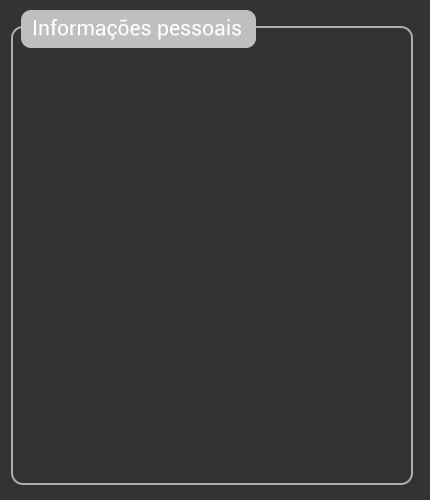
<style>
.page{position:relative;width:430px;height:500px;background:#333333}
.page>*{position:absolute;margin:0}
.t1{font:21px "Roboto-Regular";color:#ffffff}
</style>
<div class="page">
<p class="t1" style="left:34px;top:19px;width:207px;height:21px">Informações pessoais</p>
</div>
